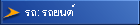
<style>
.page{position:relative;width:140px;height:25px}
.page>*{position:absolute;margin:0}
.t1{font:15.3px "EucrosiaDSE";color:#ffffff;scale:1.12 1}
</style>
<div class="page">
<p class="t1" style="left:25px;top:4px;width:50px;height:12px">Ã¶:Ã¶Â¹µì</p>
</div>
